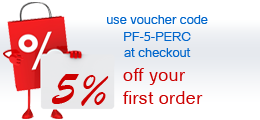
<style>
.page{position:relative;width:260px;height:120px;background:#ffffff}
.page>*{position:absolute;margin:0}
.t1{font:12.5px/16.7px "Catriel";letter-spacing:0.01em;color:#0066cc}
.t2{font:50px "BrushScriptMT";letter-spacing:0.01em;color:#cc0000}
.t3{font:18.3px/23.3px "Catriel";letter-spacing:0.01em;color:#cc0000}
</style>
<div class="page">
<p class="t1" style="left:107px;top:15px;width:101px;height:42px;text-align:center">use voucher code<br>PF-5-PERC<br>at checkout</p>
<p class="t2" style="left:52px;top:74px;width:57px;height:32px">5%</p>
<p class="t3" style="left:123px;top:68px;width:80px;height:36px">off your<br>first order</p>
</div>
